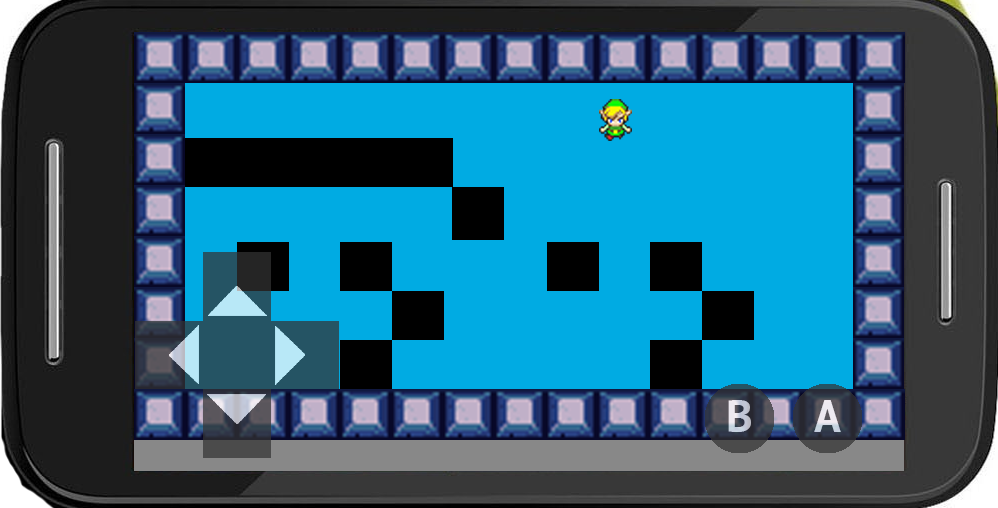
<style>
.page{position:relative;width:998px;height:508px;background:#00abe3}
.page>*{position:absolute;margin:0}
.t1{font:45.5px "PTMono-Bold"}
.t2{font:45.5px "PTMono-Bold";color:#ffffff}
</style>
<div class="page">
<p class="t1" style="left:728px;top:400px;width:23px;height:32px">B</p>
<p class="t2" style="left:814px;top:400px;width:27px;height:32px">A</p>
</div>
